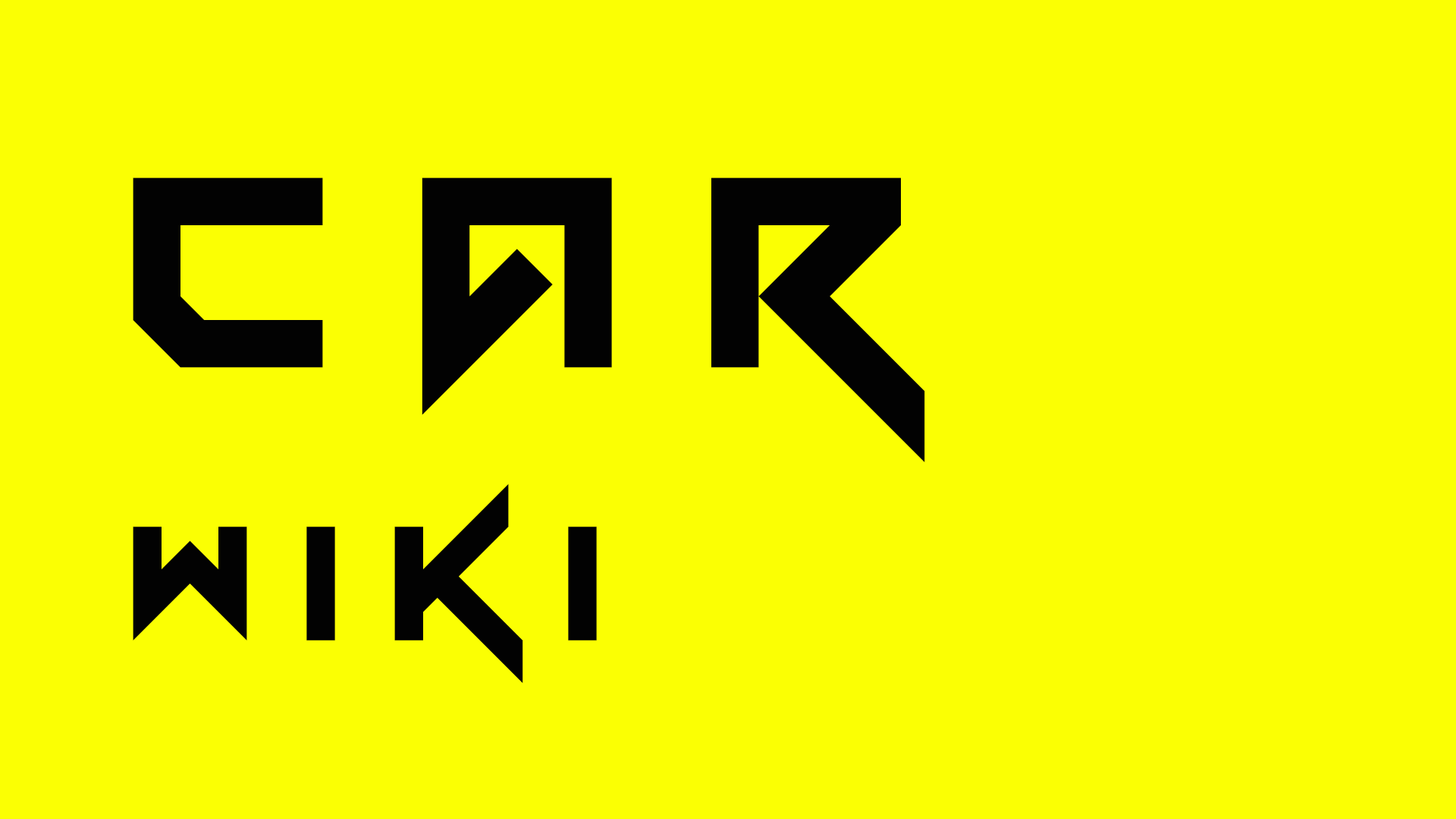
<style>
.page{position:relative;width:1456px;height:819px;background:#fbff03}
.page>*{position:absolute;margin:0}
.t1{font:227.5px "Vermin-Vibes";letter-spacing:0.2em;color:#020202}
.t2{font:379.2px "Vermin-Vibes";letter-spacing:0.2em;color:#020202}
</style>
<div class="page">
<p class="t1" style="left:133px;top:177px;width:792px;height:506px"><span class="t2">car<br></span>wiki</p>
</div>
